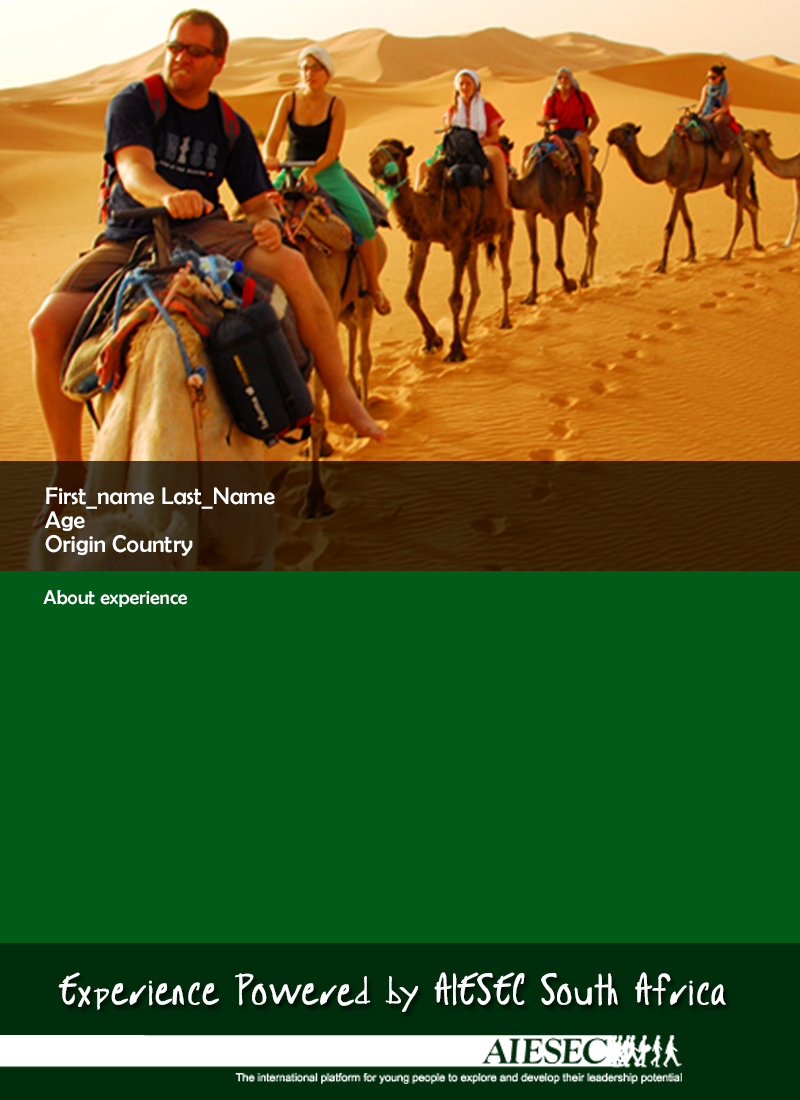
<style>
.page{position:relative;width:800px;height:1100px;background:#005c18}
.page>*{position:absolute;margin:0}
.t1{font:24px/24px "BerlinSansFB-Reg";color:#ffffff}
.t2{font:20px "BerlinSansFB-Reg";color:#ffffff}
.t3{font:32px "IamanAIESECer";color:#ffffff}
</style>
<div class="page">
<p class="t1" style="left:45px;top:487px;width:230px;height:69px">First_name Last_Name<br>Age<br>Origin Country</p>
<p class="t2" style="left:43px;top:590px;width:144px;height:17px">About experience</p>
<p class="t3" style="left:58px;top:972px;width:668px;height:40px">Experience Power d by AIESEC South Africa</p>
<p class="t3" style="left:337px;top:984px;width:17px;height:22px">e</p>
</div>
